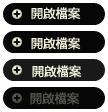
<style>
.page{position:relative;width:108px;height:112px;background:#070707}
.page>*{position:absolute;margin:0}
.t1{font:12px "MicrosoftYaHei";color:#f1f3da;font-weight:bold}
.t2{font:12px "MicrosoftYaHei";color:#f5f7df;font-weight:bold}
.t3{font:12px "MicrosoftYaHei";color:#54554c;font-weight:bold}
</style>
<div class="page">
<p class="t1" style="left:31px;top:7px;width:50px;height:13px">開啟檔案</p>
<p class="t1" style="left:31px;top:37px;width:50px;height:13px">開啟檔案</p>
<p class="t2" style="left:32px;top:65px;width:50px;height:13px">開啟檔案</p>
<p class="t3" style="left:30px;top:92px;width:50px;height:13px">開啟檔案</p>
</div>
